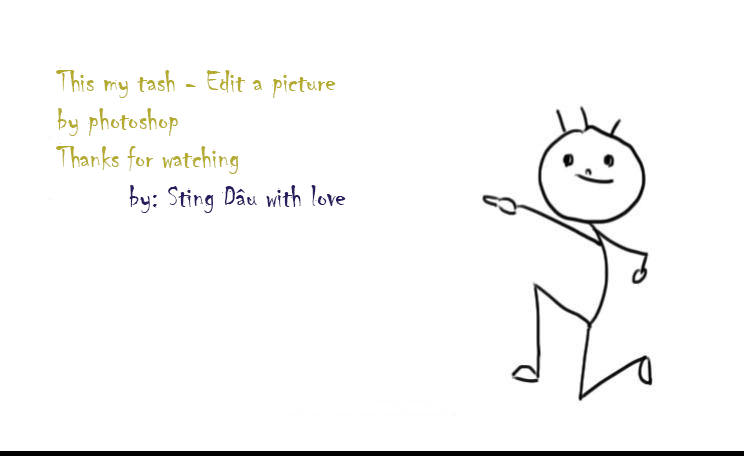
<style>
.page{position:relative;width:744px;height:456px;background:#ffffff}
.page>*{position:absolute;margin:0}
.t1{font:32px "Chiller-Regular";color:#b4ab30}
.t2{font:32px "Chiller-Regular";color:#2a1d5f}
</style>
<div class="page">
<p class="t1" style="left:56px;top:67px;width:290px;height:146px">This my tash - Edit a picture by photoshop<br>Thanks for watching<br>  <span class="t2">by: Sting Dâu with love</span></p>
</div>
